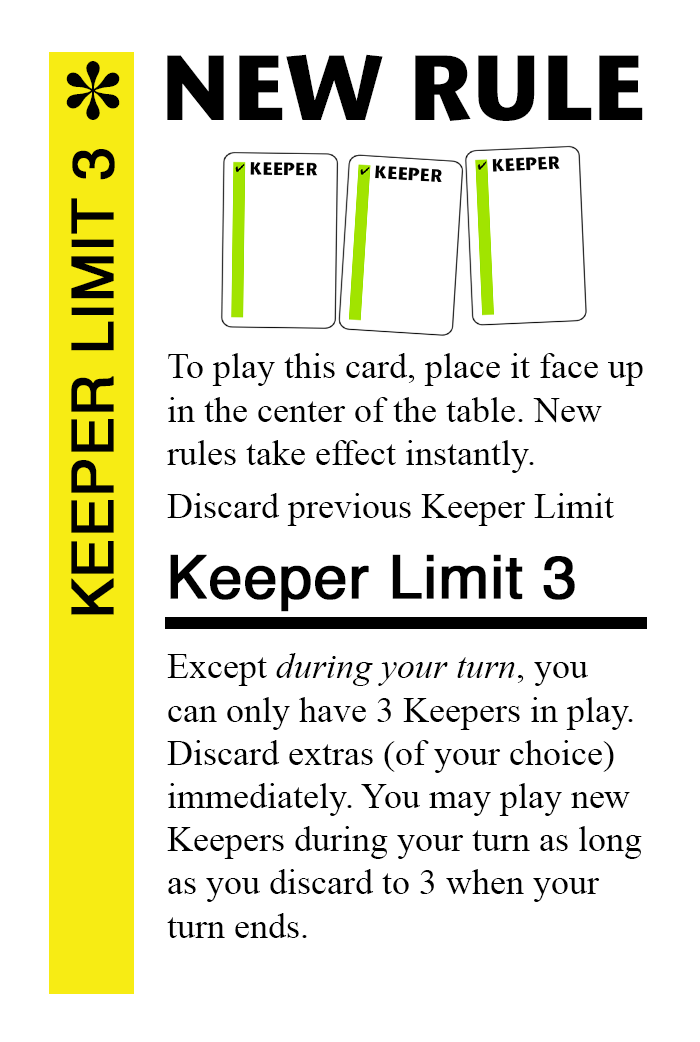
<style>
.page{position:relative;width:700px;height:1042px;background:#ffffff}
.page>*{position:absolute;margin:0}
.t1{font:92px "StoneSansITC-Bold";color:#000000}
.t2{font:82px "MS-Gothic";color:#000000}
.t3{font:58px "Helvetica";color:#000000;font-weight:bold}
.t4{font:36px "TimesNewRomanPSMT";color:#000000}
.t5{font:60px "Helvetica";color:#000000;font-weight:bold}
.t6{font:36px "TimesNewRomanPS-ItalicMT";color:#000000}
</style>
<div class="page">
<p class="t1" style="left:167px;top:54px;width:476px;height:67px">NEW RULE</p>
<p class="t2" style="left:66px;top:61px;width:54px;height:59px">✽</p>
<p class="t3" style="left:71px;top:149px;width:44px;height:466px;rotate:-90deg">KEEPER LIMIT 3</p>
<p class="t4" style="left:167px;top:353px;width:476px;height:120px">To play this card, place it face up<br>in the center of the table. New <br>rules take effect instantly.</p>
<p class="t4" style="left:167px;top:493px;width:447px;height:33px">Discard previous Keeper Limit</p>
<p class="t5" style="left:170px;top:554px;width:405px;height:58px">Keeper Limit 3</p>
<p class="t4" style="left:167px;top:653px;width:475px;height:285px">Except <span class="t6">during your turn</span>, you<br>can only have 3 Keepers in play.<br>Discard extras (of your choice)<br>immediately. You may play new<br>Keepers during your turn as long<br>as you discard to 3 when your<br>turn ends.</p>
</div>
